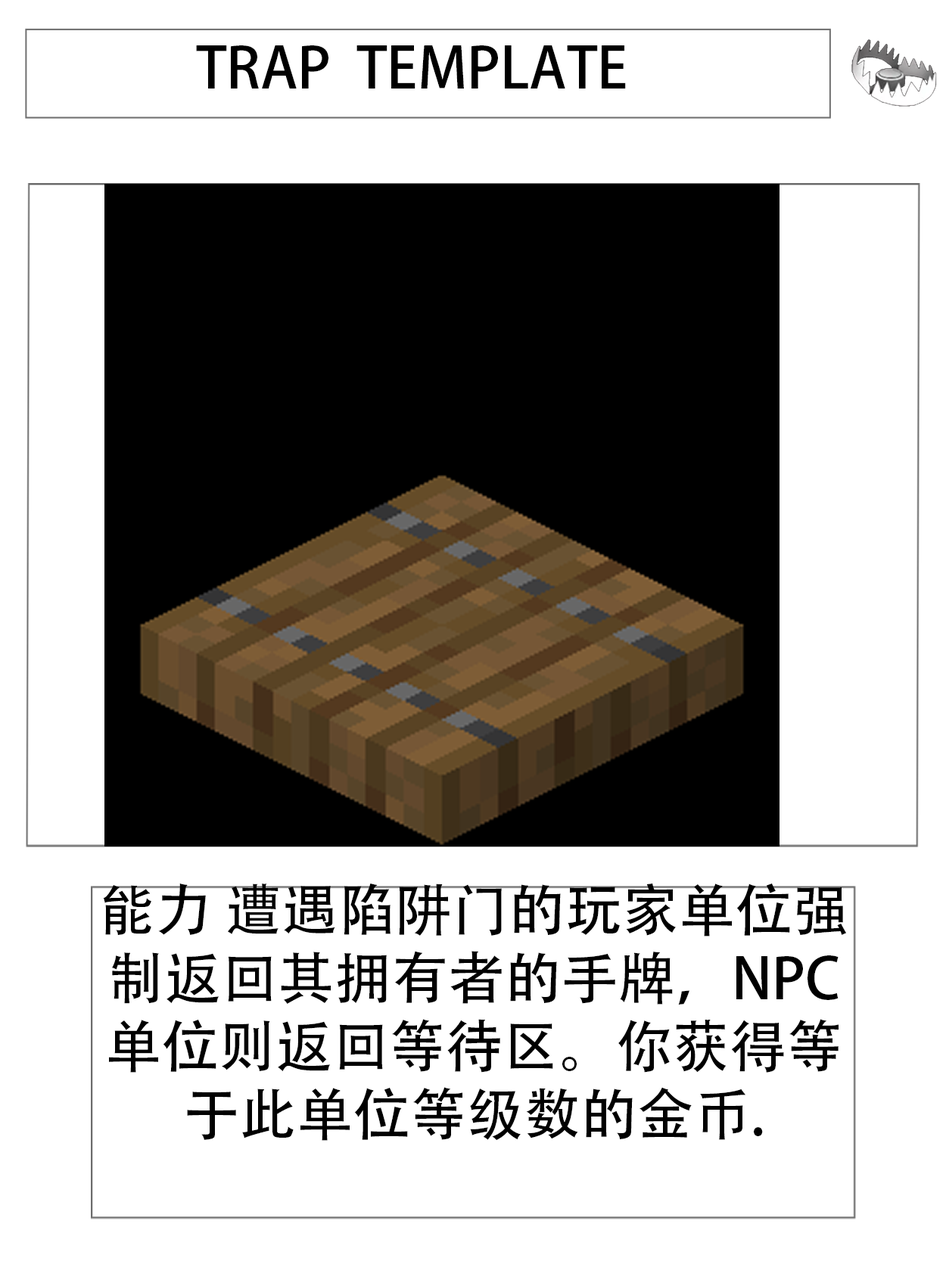
<style>
.page{position:relative;width:946px;height:1261px;background:#ffffff}
.page>*{position:absolute;margin:0}
.t1{font:56.7px "AdobeHeitiStd-Regular";color:#000000}
</style>
<div class="page">
<p class="t1" style="left:196px;top:45px;width:430px;height:44px">TRAP  TEMPLATE</p>
<p class="t1" style="left:103px;top:883px;width:743px;height:258px;text-align:center">能力 遭遇陷阱门的玩家单位强制返回其拥有者的手牌，NPC单位则返回等待区。你获得等于此单位等级数的金币.</p>
</div>
